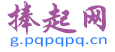
<style>
.page{position:relative;width:115px;height:52px;background:#ffffff}
.page>*{position:absolute;margin:0}
.t1{font:36px "STXingkai";color:#a3559d}
.t2{font:14.2px "Calibri";color:#267fff;scale:1.36 1}
</style>
<div class="page">
<p class="t1" style="left:7px;top:1px;width:99px;height:34px">捧起网</p>
<p class="t2" style="left:10px;top:37px;width:97px;height:10px">g.pqpqpq.cn</p>
</div>
